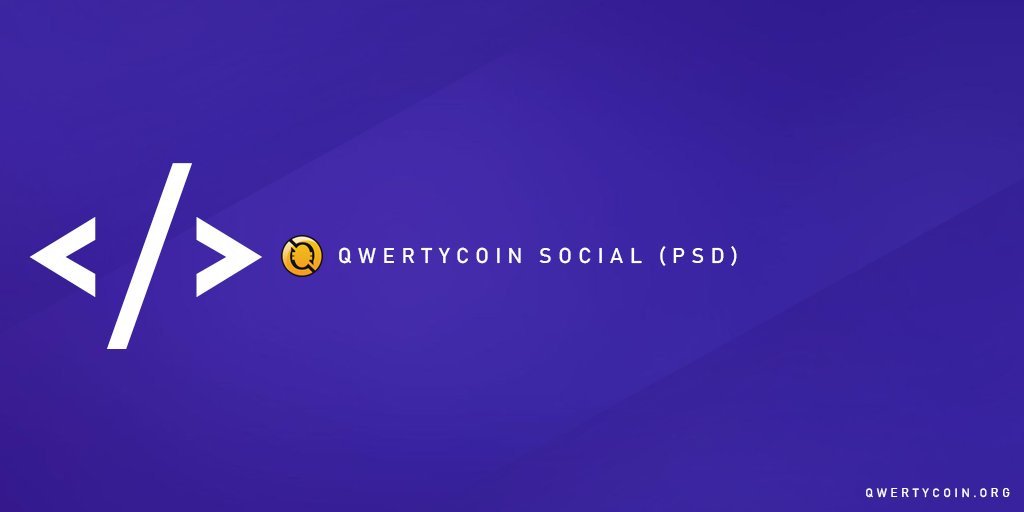
<style>
.page{position:relative;width:1024px;height:512px}
.page>*{position:absolute;margin:0}
.t1{font:200px "Bahnschrift";color:#ffffff;text-transform:uppercase}
.t2{font:21.2px "Bahnschrift";letter-spacing:0.3em;color:#ffffff;text-transform:uppercase}
.t3{font:12px "Bahnschrift";letter-spacing:0.3em;color:#ffffff;text-transform:uppercase}
</style>
<div class="page">
<p class="t1" style="left:29px;top:163px;width:233px;height:186px">&lt;/&gt;</p>
<p class="t2" style="left:339px;top:246px;width:398px;height:20px">QWERTYCOIN social (PSD)</p>
<p class="t3" style="left:866px;top:488px;width:144px;height:10px">qwertycoin.org</p>
</div>
